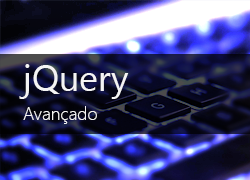
<style>
.page{position:relative;width:250px;height:180px}
.page>*{position:absolute;margin:0}
.t1{font:36px "SegoeUI";color:#f4f4f4}
.t2{font:18px "SegoeUI-Light";color:#f4f4f4}
</style>
<div class="page">
<p class="t1" style="left:19px;top:64px;width:110px;height:35px">jQuery</p>
<p class="t2" style="left:23px;top:106px;width:74px;height:18px">Avançado</p>
</div>
